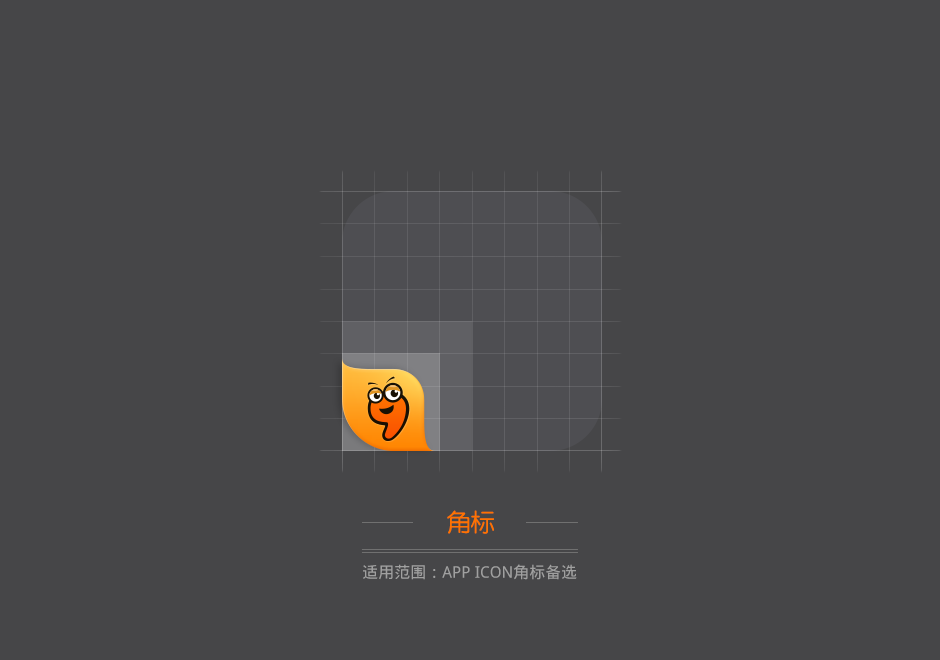
<style>
.page{position:relative;width:940px;height:660px;background:#464648}
.page>*{position:absolute;margin:0}
.t1{font:24px "FZY3JW--GB1-0";color:#ff7200}
.t2{font:16px "DroidSansFallback";color:#a0a0a0}
</style>
<div class="page">
<p class="t1" style="left:447px;top:510px;width:47px;height:24px">角标</p>
<p class="t1" style="left:447px;top:510px;width:47px;height:24px">角标</p>
<p class="t2" style="left:363px;top:564px;width:214px;height:16px">适用范围：APP ICON角标首选</p>
<p class="t2" style="left:363px;top:564px;width:214px;height:16px">适用范围：APP ICON角标备选</p>
</div>
